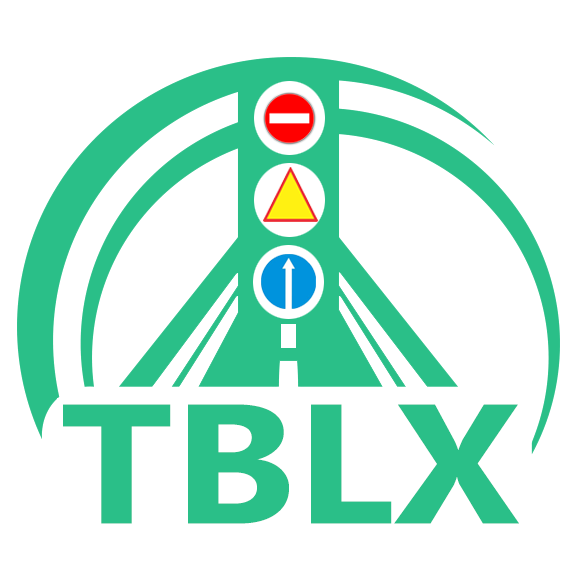
<style>
.page{position:relative;width:578px;height:578px;background:#ffffff}
.page>*{position:absolute;margin:0}
.t1{font:169.7px "MicrosoftPhagsPa-Bold";color:#2abf88;scale:1.13 1}
</style>
<div class="page">
<p class="t1" style="left:63px;top:404px;width:456px;height:120px">TBLX</p>
</div>
